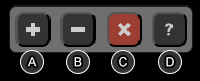
<style>
.page{position:relative;width:200px;height:81px;background:#000000}
.page>*{position:absolute;margin:0}
.t1{font:12.5px "ArialMT";color:#ffffff}
</style>
<div class="page">
<p class="t1" style="left:28px;top:57px;width:9px;height:10px">A</p>
<p class="t1" style="left:74px;top:57px;width:8px;height:10px">B</p>
<p class="t1" style="left:119px;top:57px;width:8px;height:10px">C</p>
<p class="t1" style="left:166px;top:57px;width:8px;height:10px">D</p>
</div>
